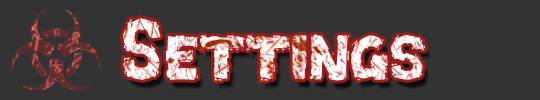
<style>
.page{position:relative;width:540px;height:100px;background:#333333}
.page>*{position:absolute;margin:0}
.t1{font:87.1px "DeadFontWalking"}
</style>
<div class="page">
<p class="t1" style="left:123px;top:18px;width:302px;height:63px">Settings</p>
</div>
